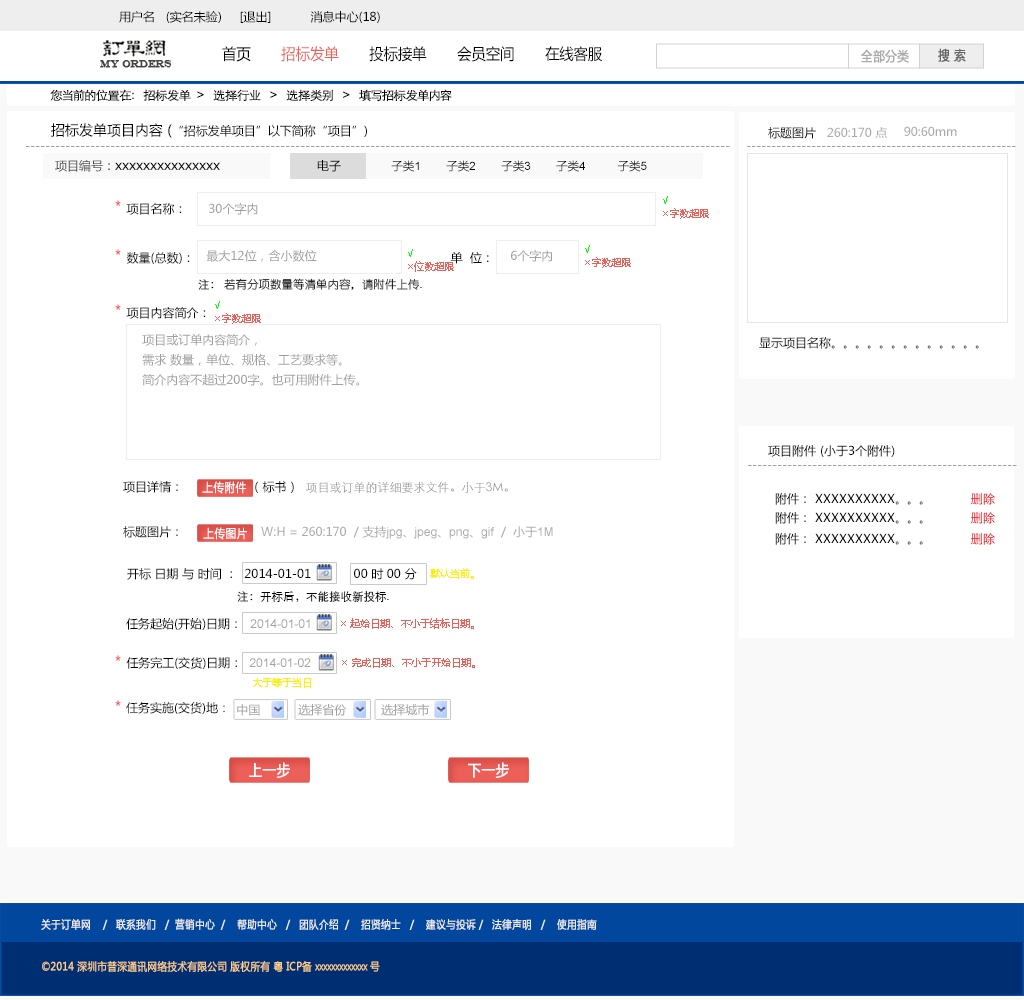
<style>
.page{position:relative;width:1024px;height:1000px;background:#ffffff}
.page>*{position:absolute;margin:0}
.t1{font:12px "MicrosoftYaHei";color:#000000}
.t2{font:15.4px "MicrosoftYaHei";color:#000000;font-variant:small-caps;scale:0.94 1}
.t3{font:15.4px "MicrosoftYaHei";color:#ed6059;font-variant:small-caps;scale:0.94 1}
.t4{font:13.2px "MicrosoftYaHei";color:#aaaaaa;font-variant:small-caps;font-weight:bold;scale:0.86 1}
.t5{font:13.2px "MicrosoftYaHei";color:#626262;font-variant:small-caps;font-weight:bold;scale:0.86 1}
.t6{font:9.9px "EngraversMT";color:#434343;font-variant:small-caps;font-weight:bold;scale:0.86 1}
.t7{font:12px "STXihei";color:#060606;scale:1.04 1}
.t8{font:14px "MicrosoftYaHei";color:#000000}
.t9{font:12px "MicrosoftYaHei";color:#aaaaaa}
.t10{font:12px "MicrosoftYaHei";color:#a0a0a0}
.t11{font:14px "ArialMT";color:#000000}
.t12{font:11.5px "MicrosoftYaHei";color:#000000}
.t13{font:11.5px "ArialMT";color:#000000}
.t14{font:10px/13px "MicrosoftYaHei";color:#ed6059}
.t15{font:10px/13px "MicrosoftYaHei";color:#00ff00}
.t16{font:14px "MicrosoftYaHei"}
.t17{font:11.5px "STXihei";color:#000000}
.t18{font:11.5px "YouYuan";color:#000000}
.t19{font:11px "STXihei";color:#000000}
.t20{font:12px/20px "MicrosoftYaHei";color:#a0a0a0}
.t21{font:12px/48px "MicrosoftYaHei";color:#a0a0a0}
.t22{font:12px/45px "MicrosoftYaHei";color:#000000}
.t23{font:12px/45px "STXihei";color:#919191}
.t24{font:12px/20px "MicrosoftYaHei";color:#000000}
.t25{font:12px/20px "MicrosoftYaHei";color:#aaaaaa}
.t26{font:12px/45px "MicrosoftYaHei";color:#aaaaaa}
.t27{font:12px/45px "ArialMT";color:#aaaaaa}
.t28{font:12.1px "MicrosoftYaHei";color:#ffffff;font-variant:small-caps;font-weight:bold;scale:0.86 1}
.t29{font:10px "MicrosoftYaHei";color:#fff100}
.t30{font:12px "ArialMT";color:#a0a0a0}
.t31{font:10px "MicrosoftYaHei";color:#ed6059}
.t32{font:15.4px "MicrosoftYaHei";color:#ffffff;font-variant:small-caps;font-weight:bold;scale:0.86 1}
.t33{font:11px "MicrosoftYaHei";color:#eeeeee;font-variant:small-caps;font-weight:bold;scale:0.86 1}
.t34{font:15.4px "STXihei";color:#eeeeee;font-variant:small-caps;font-weight:bold;scale:0.86 1}
.t35{font:11px "MicrosoftYaHei";color:#facd89;font-variant:small-caps;font-weight:bold;scale:0.87 1}
.t36{font:11px "MicrosoftYaHei";color:#eeeeee;font-variant:small-caps;font-weight:bold;scale:0.87 1}
</style>
<div class="page">
<p class="t1" style="left:119px;top:11px;width:261px;height:12px">用户名   (实名未验)     [退出]           消息中心(18)</p>
<p class="t2" style="left:222px;top:46px;width:381px;height:16px">首页      <span class="t3"> 招标发单</span>       投标接单       会员空间       在线客服</p>
<p class="t4" style="left:861px;top:49px;width:48px;height:14px">全部分类</p>
<p class="t5" style="left:938px;top:48px;width:28px;height:14px">搜 索</p>
<p class="t6" style="left:100px;top:60px;width:72px;height:8px">MY ORDERS</p>
<p class="t7" style="left:50px;top:89px;width:402px;height:13px">您当前的位置在：  招标发单  &gt;   选择行业   &gt;   选择类别   &gt;   填写招标发单内容</p>
<p class="t1" style="left:51px;top:123px;width:316px;height:15px"><span class="t8">招标发单项目内容 (</span>“招标发单项目”以下简称“项目”)</p>
<p class="t9" style="left:904px;top:126px;width:53px;height:10px">90:60mm</p>
<p class="t1" style="left:768px;top:127px;width:48px;height:12px">标题图片</p>
<p class="t9" style="left:827px;top:127px;width:60px;height:12px">260:170 点</p>
<p class="t10" style="left:26px;top:146px;width:704px;height:1px">---------------------------------------------------------------------------------------------------------------------------------------------</p>
<p class="t10" style="left:747px;top:146px;width:269px;height:1px">------------------------------------------------------</p>
<p class="t11" style="left:55px;top:160px;width:165px;height:12px"><span class="t1">项目编号</span><span class="t1">：</span>xxxxxxxxxxxxxxx</p>
<p class="t1" style="left:317px;top:160px;width:24px;height:12px">电子</p>
<p class="t12" style="left:391px;top:160px;width:256px;height:12px"><span class="t8">                    </span> 子类<span class="t13">1        </span>子类<span class="t13">2        </span>子类<span class="t13">3        </span>子类<span class="t13">4          </span>子类<span class="t13">5</span></p>
<p class="t14" style="left:663px;top:196px;width:46px;height:23px"><span class="t15">√<br></span>×字数超限</p>
<p class="t16" style="left:115px;top:200px;width:6px;height:6px">*</p>
<p class="t1" style="left:126px;top:203px;width:56px;height:12px"><span class="t17">                    <br><br>                    </span>项目名称：</p>
<p class="t10" style="left:209px;top:202px;width:49px;height:13px">30个字内</p>
<p class="t14" style="left:585px;top:245px;width:46px;height:23px"><span class="t15">√<br></span>×字数超限</p>
<p class="t16" style="left:115px;top:249px;width:6px;height:6px">*</p>
<p class="t1" style="left:126px;top:252px;width:64px;height:12px"><span class="t17">                    <br><br>                    </span>数量(总数)：</p>
<p class="t10" style="left:206px;top:250px;width:111px;height:12px">最大12位，含小数位</p>
<p class="t14" style="left:408px;top:249px;width:46px;height:23px"><span class="t15">√<br></span>×位数超限</p>
<p class="t1" style="left:450px;top:251px;width:39px;height:13px"><span class="t17">                    <br><br>                    </span>  单  位：</p>
<p class="t10" style="left:511px;top:249px;width:41px;height:13px">6个字内</p>
<p class="t18" style="left:198px;top:278px;width:224px;height:12px"><span class="t19">                    <br><br>                    </span><span class="t17">注： </span>若有分项数量等清单内容，请附件上传.</p>
<p class="t16" style="left:115px;top:304px;width:6px;height:6px">*</p>
<p class="t14" style="left:215px;top:301px;width:46px;height:23px"><span class="t15">√<br></span>×字数超限</p>
<p class="t1" style="left:126px;top:307px;width:80px;height:12px"><span class="t17">                    <br><br>                    </span>项目内容简介：</p>
<p class="t20" style="left:142px;top:333px;width:217px;height:53px">项目或订单内容简介，<br>需求 数量，单位、规格、工艺要求等。<br><span class="t21">简介内容不超过200字。</span>也可用附件上传。</p>
<p class="t1" style="left:759px;top:337px;width:220px;height:12px">显示项目名称。。。。。。。。。。。。。</p>
<p class="t1" style="left:768px;top:445px;width:127px;height:12px">项目附件 (小于3个附件)</p>
<p class="t10" style="left:748px;top:465px;width:269px;height:1px">------------------------------------------------------</p>
<p class="t22" style="left:123px;top:481px;width:430px;height:58px">项目详情：                   （标书）  <span class="t23">项目或订单的详细要求文件。小于3M。<br></span><span class="t24">标题图片：                      </span><span class="t25">W:H = 260:170  / </span><span class="t26">支持</span><span class="t27">jpg</span><span class="t26">、</span><span class="t27">jpeg</span><span class="t26">、</span><span class="t27">png</span><span class="t26">、</span><span class="t27">gif</span><span class="t26">  /  小于</span><span class="t27">1M</span></p>
<p class="t28" style="left:202px;top:481px;width:44px;height:13px">上传附件</p>
<p class="t1" style="left:775px;top:493px;width:220px;height:12px">附件： XXXXXXXXXX。。。          删除</p>
<p class="t1" style="left:775px;top:512px;width:220px;height:12px">附件： XXXXXXXXXX。。。          删除</p>
<p class="t28" style="left:203px;top:527px;width:44px;height:13px">上传图片</p>
<p class="t1" style="left:775px;top:533px;width:220px;height:12px">附件： XXXXXXXXXX。。。          删除</p>
<p class="t1" style="left:127px;top:567px;width:290px;height:13px">开标 日期 与 时间 ：  2014-01-01            00 时 00 分</p>
<p class="t29" style="left:430px;top:568px;width:44px;height:11px">默认当前。</p>
<p class="t17" style="left:237px;top:591px;width:152px;height:11px"><span class="t19">                    <br><br>                    </span>注：开标后，不能接收新投标<span class="t18">.</span></p>
<p class="t1" style="left:126px;top:617px;width:111px;height:13px">任务起始(开始)日期：</p>
<p class="t30" style="left:250px;top:619px;width:60px;height:9px">2014-01-01</p>
<p class="t31" style="left:341px;top:618px;width:133px;height:11px">× 起始日期、不小于结标日期。</p>
<p class="t16" style="left:115px;top:655px;width:6px;height:6px">*</p>
<p class="t1" style="left:126px;top:656px;width:185px;height:13px">任务完工(交货)日期：  <span class="t30">2014-01-02</span></p>
<p class="t31" style="left:342px;top:658px;width:133px;height:10px">× 完成日期、不小于开始日期。</p>
<p class="t29" style="left:253px;top:678px;width:58px;height:10px">大于等于当日</p>
<p class="t16" style="left:115px;top:700px;width:6px;height:6px">*</p>
<p class="t1" style="left:126px;top:702px;width:99px;height:12px">任务实施(交货)地：</p>
<p class="t10" style="left:237px;top:704px;width:23px;height:12px">中国</p>
<p class="t10" style="left:298px;top:704px;width:49px;height:12px">选择省份</p>
<p class="t10" style="left:381px;top:703px;width:48px;height:13px">选择城市</p>
<p class="t32" style="left:249px;top:762px;width:41px;height:16px">上一步</p>
<p class="t32" style="left:468px;top:762px;width:41px;height:16px">下一步</p>
<p class="t33" style="left:41px;top:918px;width:556px;height:12px"><span class="t34"><br><br></span>关于订单网    /   联系我们   /  营销中心  /    帮助中心   /   团队介绍  /    招贤纳士   /    建议与投诉 /   法律声明   /    使用指南</p>
<p class="t35" style="left:42px;top:961px;width:338px;height:11px"><span class="t36"> </span>©2014 深圳市普深通讯网络技术有限公司 版权所有 粤 ICP备 xxxxxxxxxxxxx 号</p>
</div>
